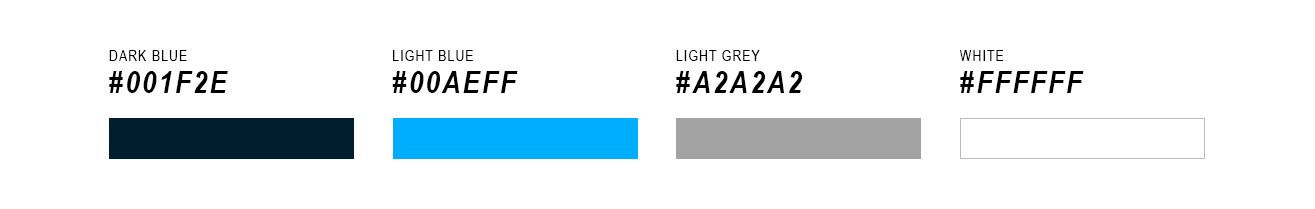
<style>
.page{position:relative;width:1315px;height:209px;background:#ffffff}
.page>*{position:absolute;margin:0}
.t1{font:14.8px "ArialNarrow";letter-spacing:0.08em;color:#000000}
.t2{font:30.9px "ArialNarrow-BoldItalic";letter-spacing:0.08em;color:#000000}
</style>
<div class="page">
<p class="t1" style="left:109px;top:50px;width:78px;height:11px">DARK BLUE</p>
<p class="t1" style="left:393px;top:50px;width:80px;height:11px">LIGHT BLUE</p>
<p class="t1" style="left:676px;top:50px;width:84px;height:11px">LIGHT GREY</p>
<p class="t1" style="left:960px;top:50px;width:44px;height:11px">WHITE</p>
<p class="t2" style="left:109px;top:71px;width:119px;height:22px">#001F2E</p>
<p class="t2" style="left:392px;top:71px;width:126px;height:22px">#00AEFF</p>
<p class="t2" style="left:676px;top:71px;width:126px;height:22px">#A2A2A2</p>
<p class="t2" style="left:960px;top:71px;width:124px;height:22px">#FFFFFF</p>
</div>
